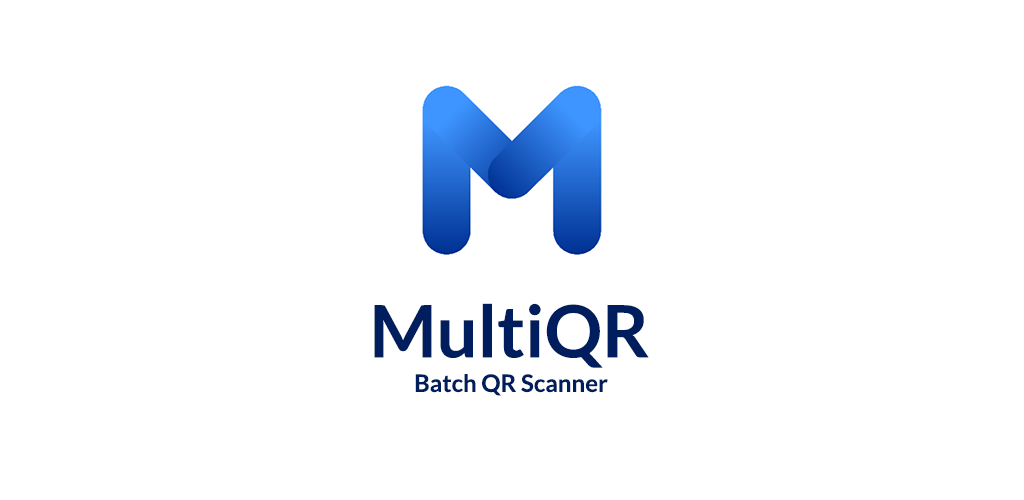
<style>
.page{position:relative;width:1024px;height:500px;background:#ffffff}
.page>*{position:absolute;margin:0}
.t1{font:72.1px "Lato-Bold";color:#001e5e}
.t2{font:24px "Lato-Bold";color:#001e5e}
</style>
<div class="page">
<p class="t1" style="left:374px;top:303px;width:275px;height:65px">MultiQR</p>
<p class="t2" style="left:415px;top:374px;width:193px;height:22px">Batch QR Scanner</p>
</div>
